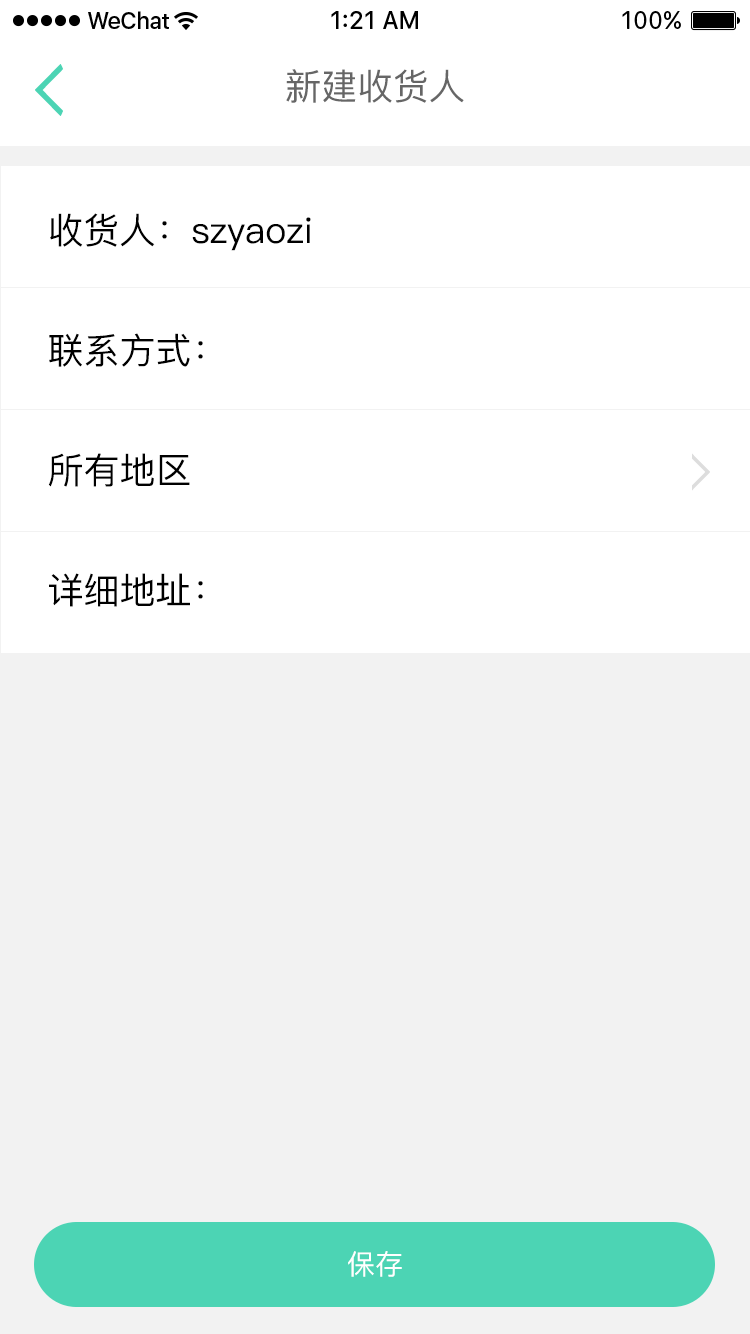
<style>
.page{position:relative;width:750px;height:1334px;background:#f2f2f2}
.page>*{position:absolute;margin:0}
.t1{font:36px "PingFang-SC-Medium";color:#666666}
.t2{font:36px/120px "PingFang-SC-Medium";color:#000000}
.t3{font:28px "PingFang-SC-Medium";color:#ffffff}
</style>
<div class="page">
<p class="t1" style="left:286px;top:69px;width:178px;height:34px">新建收货人</p>
<p class="t2" style="left:48px;top:213px;width:263px;height:394px">收货人：szyaozi<br>联系方式：<br>所有地区<br>详细地址：</p>
<p class="t3" style="left:348px;top:1251px;width:54px;height:26px">保存</p>
</div>
